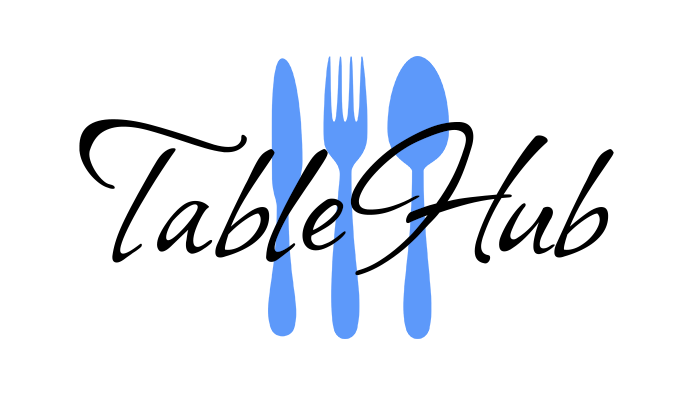
<style>
.page{position:relative;width:700px;height:400px;background:#ffffff}
.page>*{position:absolute;margin:0}
.t1{font:210px "Allison-Regular";color:#000000}
</style>
<div class="page">
<p class="t1" style="left:79px;top:119px;width:535px;height:157px">TableHub</p>
</div>
